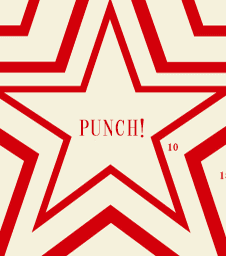
<style>
.page{position:relative;width:226px;height:256px;background:#f5f1dc}
.page>*{position:absolute;margin:0}
.t1{font:22px "HGMinchoB";letter-spacing:0.05em;color:#d3000a}
.t2{font:22px "HGMinchoB";letter-spacing:-0.05em;color:#d3000a}
</style>
<div class="page">
<p class="t1" style="left:79px;top:118px;width:65px;height:20px">PUNC<span class="t2">H</span>!</p>
</div>
